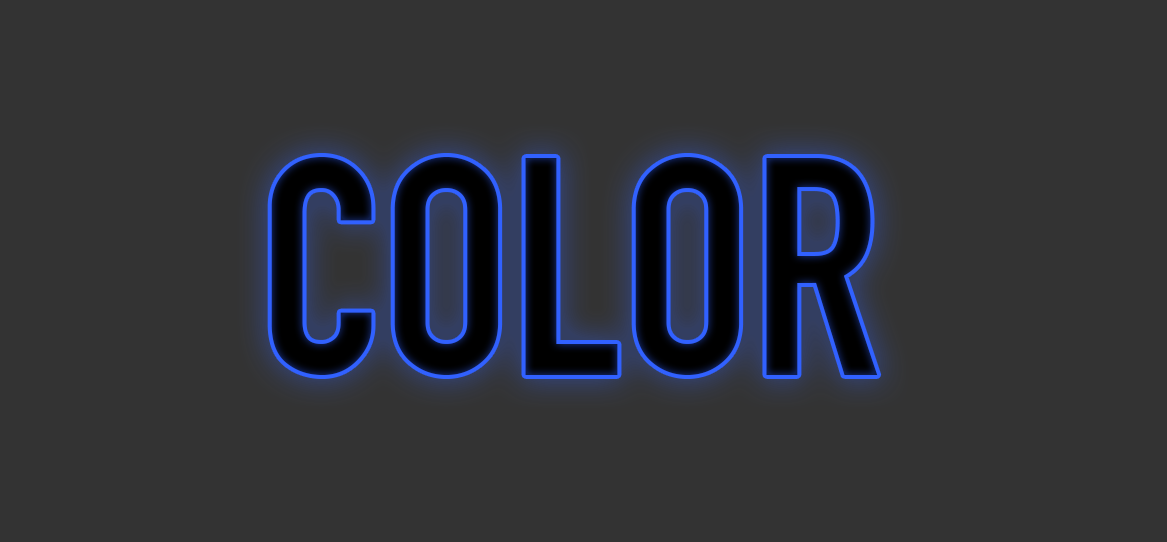
<style>
.page{position:relative;width:1167px;height:542px;background:#333333}
.page>*{position:absolute;margin:0}
.t1{font:302.5px "DINEngschrift";color:#010103}
</style>
<div class="page">
<p class="t1" style="left:271px;top:157px;width:607px;height:218px">COLOR</p>
</div>
